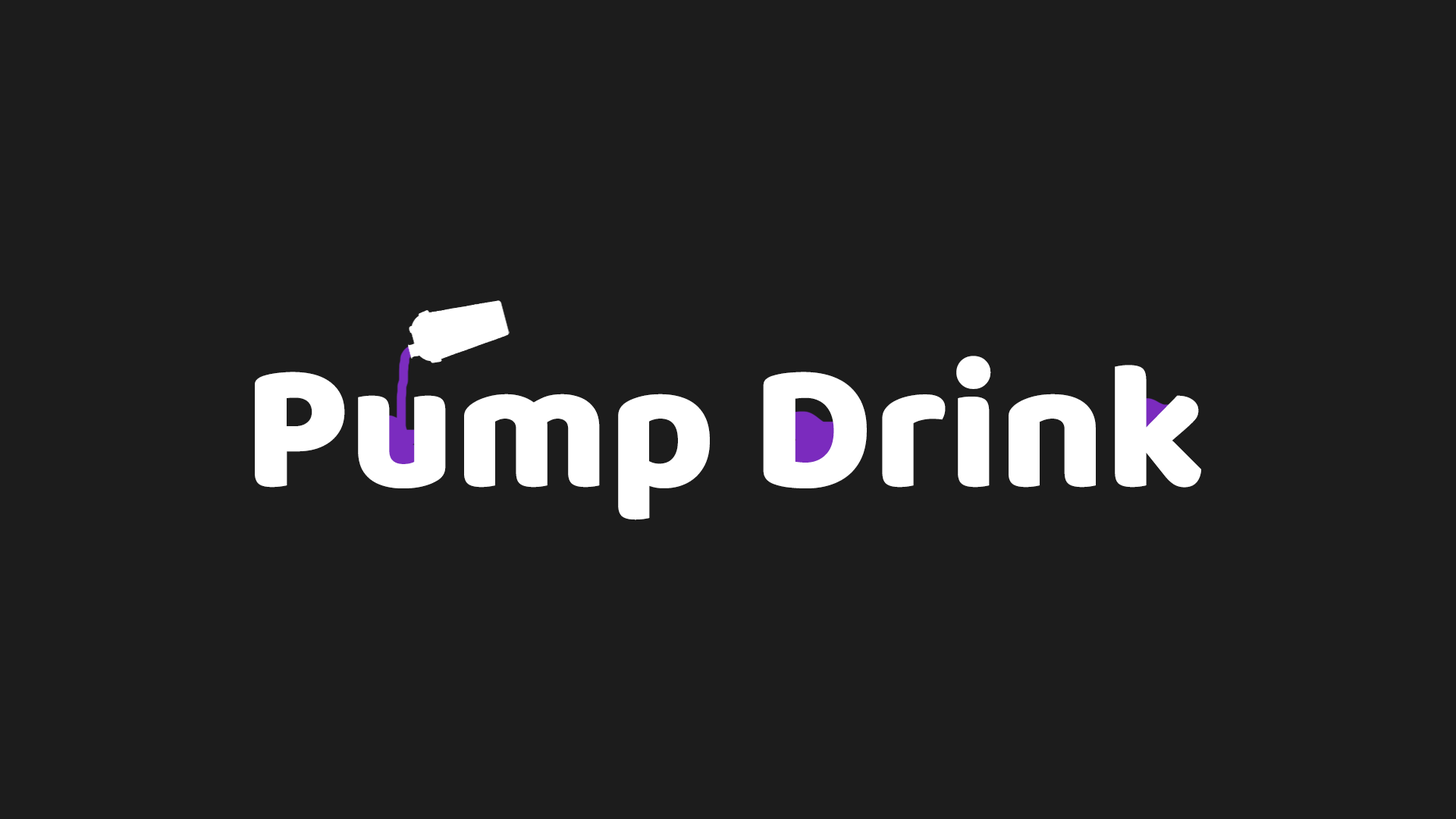
<style>
.page{position:relative;width:1456px;height:819px;background:#1c1c1c}
.page>*{position:absolute;margin:0}
.t1{font:181.9px "Baloo2-ExtraBold";color:#ffffff}
</style>
<div class="page">
<p class="t1" style="left:255px;top:356px;width:946px;height:164px">Pump Drink</p>
</div>
